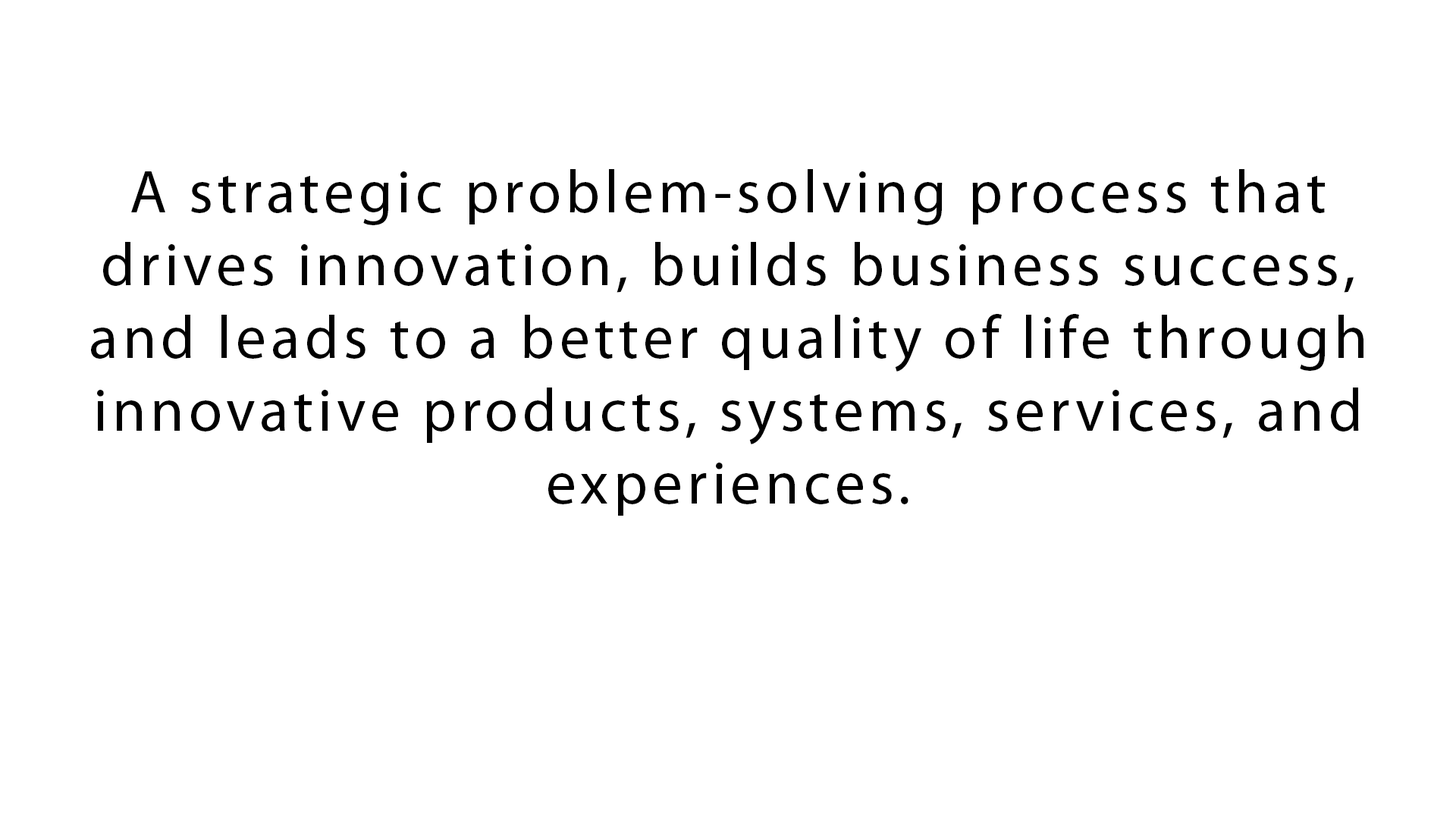
<style>
.page{position:relative;width:1456px;height:819px;background:#ffffff}
.page>*{position:absolute;margin:0}
.t1{font:60.7px "MyriadPro-Regular";letter-spacing:0.075em;color:#000000}
</style>
<div class="page">
<p class="t1" style="left:91px;top:169px;width:1272px;height:347px;text-align:center">A strategic problem-solving process that drives innovation, builds business success, and leads to a better quality of life through innovative products, systems, services, and experiences.</p>
</div>
